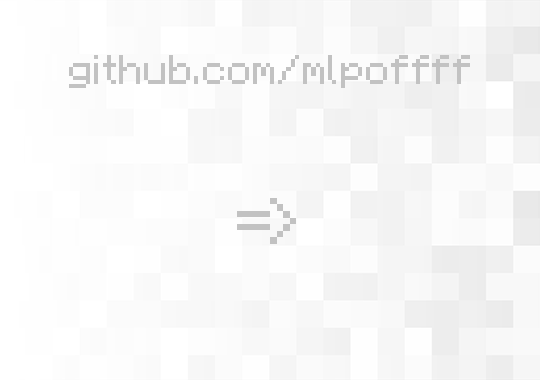
<style>
.page{position:relative;width:540px;height:380px}
.page>*{position:absolute;margin:0}
.t1{font:33.5px "Minecraft";color:#c2c2c2}
.t2{font:52.7px "Minecraft";color:#c2c2c2}
</style>
<div class="page">
<p class="t1" style="left:69px;top:55px;width:401px;height:33px">github.com/mlpoffff</p>
<p class="t2" style="left:270px;top:198px;width:26px;height:46px">&gt;</p>
<p class="t2" style="left:237px;top:211px;width:33px;height:19px">=</p>
</div>
